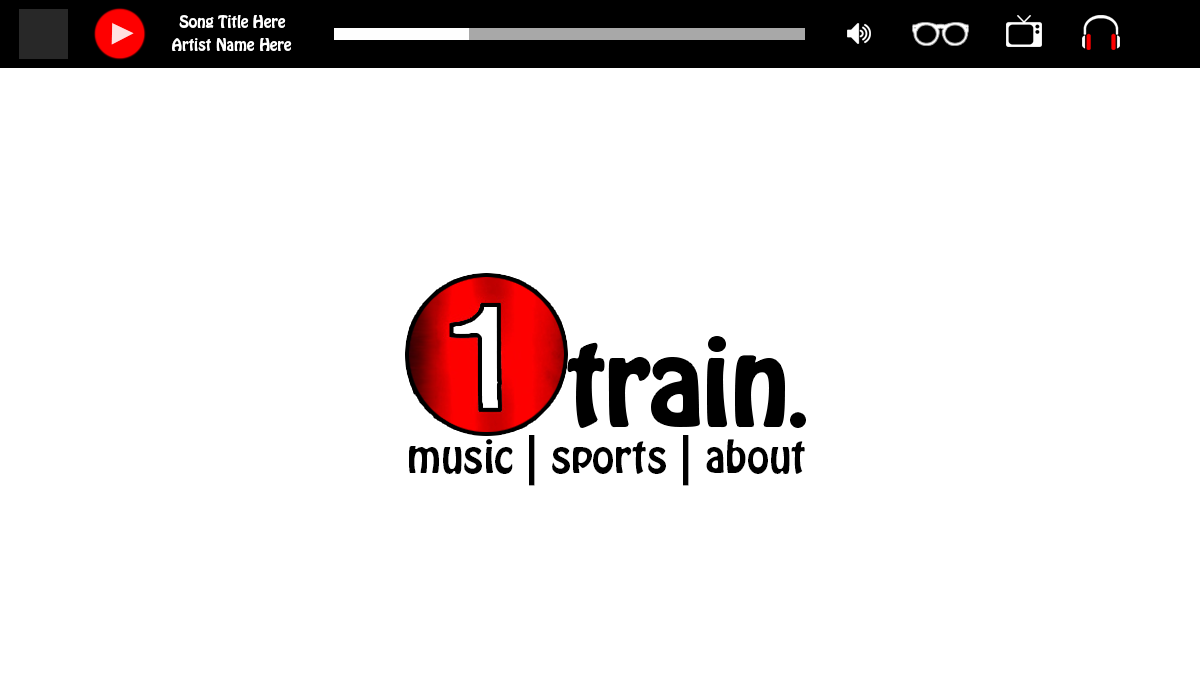
<style>
.page{position:relative;width:1200px;height:700px;background:#ffffff}
.page>*{position:absolute;margin:0}
.t1{font:15px "HoboStd";color:#ffffff}
.t2{font:40px "HoboStd";color:#000000}
</style>
<div class="page">
<p class="t1" style="left:179px;top:15px;width:107px;height:13px">Song Title Here</p>
<p class="t1" style="left:172px;top:38px;width:120px;height:13px">Artist Name Here</p>
<p class="t2" style="left:409px;top:435px;width:396px;height:51px">music | sports | about</p>
</div>
